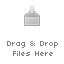
<style>
.page{position:relative;width:64px;height:64px;background:#ffffff}
.page>*{position:absolute;margin:0}
.t1{font:8px "04b03";color:#7f7f7f}
</style>
<div class="page">
<p class="t1" style="left:7px;top:41px;width:51px;height:15px;text-align:center">Drag &amp; Drop <br>Files Here</p>
</div>
